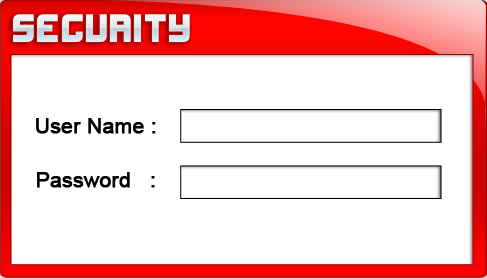
<style>
.page{position:relative;width:487px;height:278px;background:#ffffff}
.page>*{position:absolute;margin:0}
.t1{font:35.5px "Xifiction";color:#e1eaf0}
.t2{font:20.7px "ArialMT";color:#000000;font-weight:bold}
</style>
<div class="page">
<p class="t1" style="left:13px;top:14px;width:177px;height:28px">Security</p>
<p class="t2" style="left:36px;top:118px;width:120px;height:16px">User Name :</p>
<p class="t2" style="left:37px;top:172px;width:118px;height:16px">Password   :</p>
</div>
